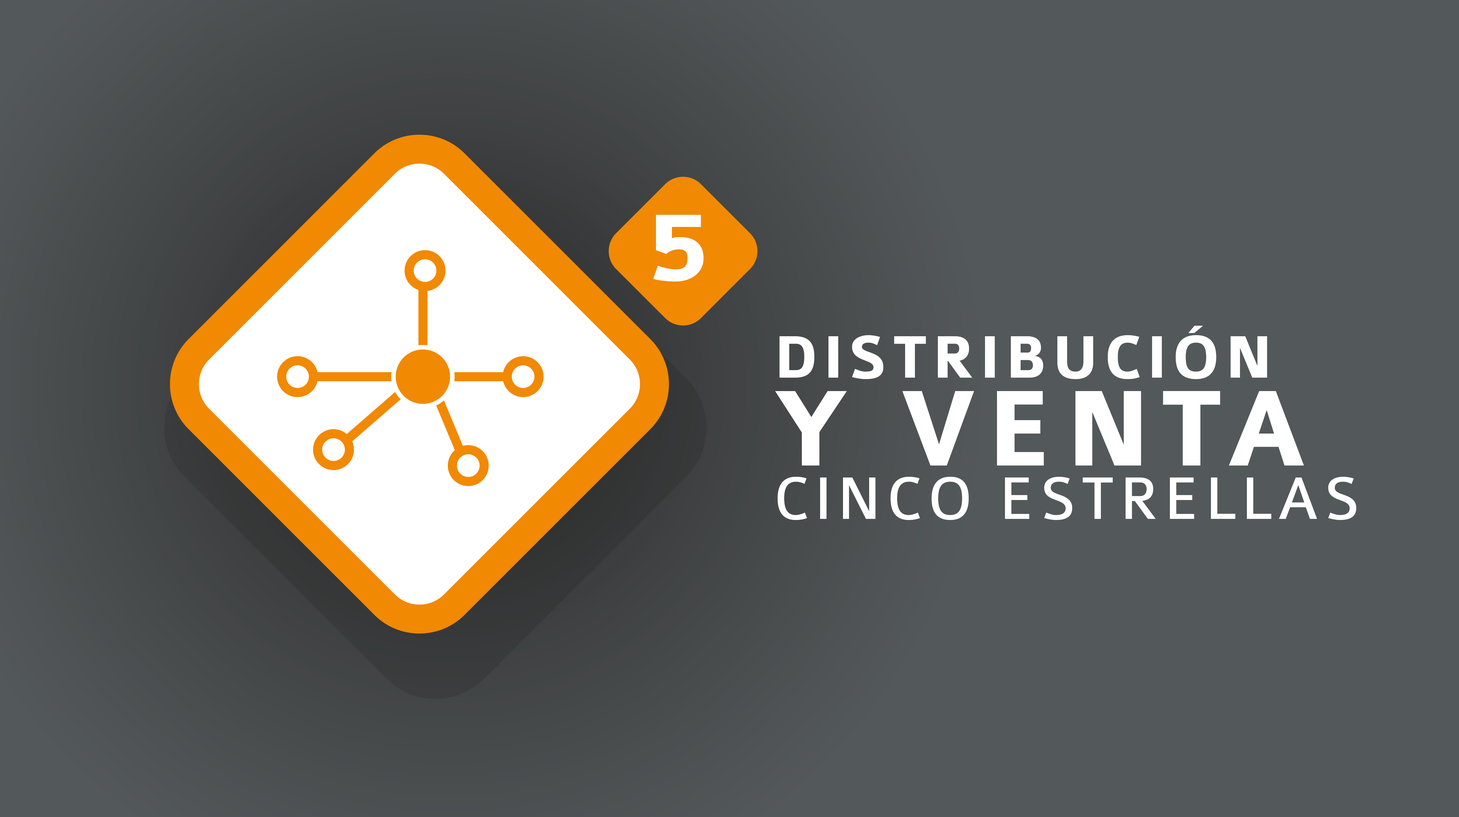
<style>
.page{position:relative;width:1459px;height:817px;background:#53585a}
.page>*{position:absolute;margin:0}
.t1{font:106.8px "Colaborate-Bold";letter-spacing:0.08em;color:#ffffff}
.t2{font:63.9px/53.2px "Colaborate-Regular";letter-spacing:0.08em;color:#ffffff}
.t3{font:17.2px/87.8px "Colaborate-Light";letter-spacing:0.08em;color:#ffffff}
.t4{font:63.9px/87.8px "Colaborate-Bold";letter-spacing:0.08em;color:#ffffff}
.t5{font:115.1px/87.8px "Colaborate-Bold";letter-spacing:0.08em;color:#ffffff}
</style>
<div class="page">
<p class="t1" style="left:653px;top:215px;width:51px;height:67px">5</p>
<p class="t2" style="left:775px;top:326px;width:581px;height:194px"><span class="t3"><br></span><span class="t4">DISTRIBUCIÓN<br></span><span class="t5">Y VENTA<br></span>CINCO ESTRELLAS</p>
</div>
